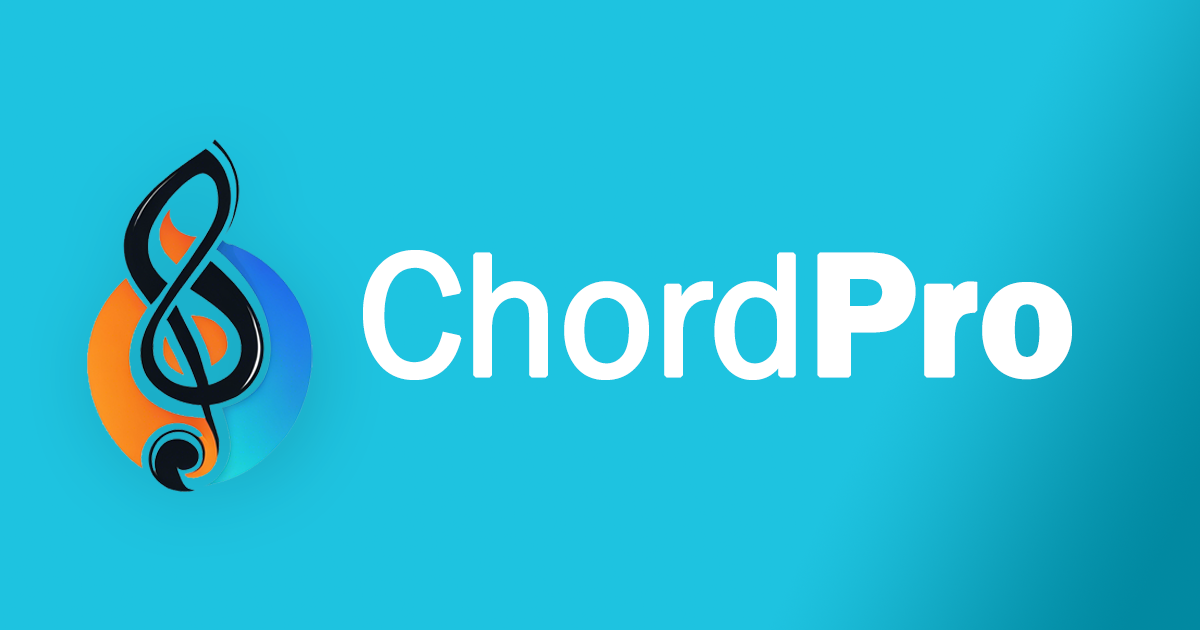
<style>
.page{position:relative;width:1200px;height:630px;background:#1ec3e0}
.page>*{position:absolute;margin:0}
.t1{font:180px "FranklinGothic-Book";letter-spacing:-0.025em;color:#ffffff;font-weight:bold}
.t2{font:180px "FranklinGothic-Demi";letter-spacing:-0.025em;color:#ffffff;font-weight:bold}
</style>
<div class="page">
<p class="t1" style="left:363px;top:250px;width:709px;height:130px">Chord<span class="t2">Pro</span></p>
</div>
